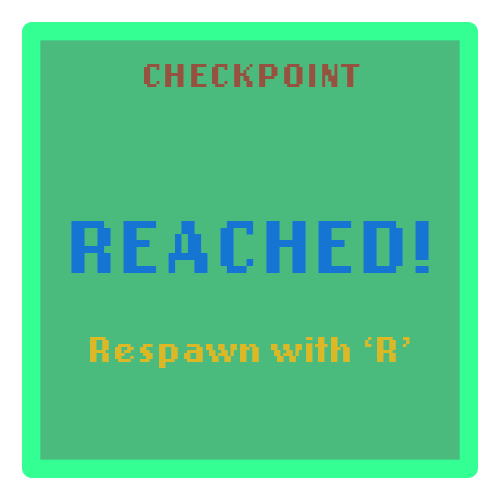
<style>
.page{position:relative;width:500px;height:500px;background:#4bba7d}
.page>*{position:absolute;margin:0}
.t1{font:34.1px "LoRes12OT-Bold";color:#965240;scale:1.1 1}
.t2{font:78.1px "LoRes12OT-Bold";color:#0760e4}
.t3{font:37.5px "LoRes12OT-Bold";color:#dcb924}
</style>
<div class="page">
<p class="t1" style="left:144px;top:64px;width:216px;height:23px">CHECKPOINT</p>
<p class="t2" style="left:71px;top:221px;width:358px;height:52px;opacity:0.8">REACHED!</p>
<p class="t3" style="left:90px;top:337px;width:320px;height:31px">Respawn with ‘R’</p>
</div>
